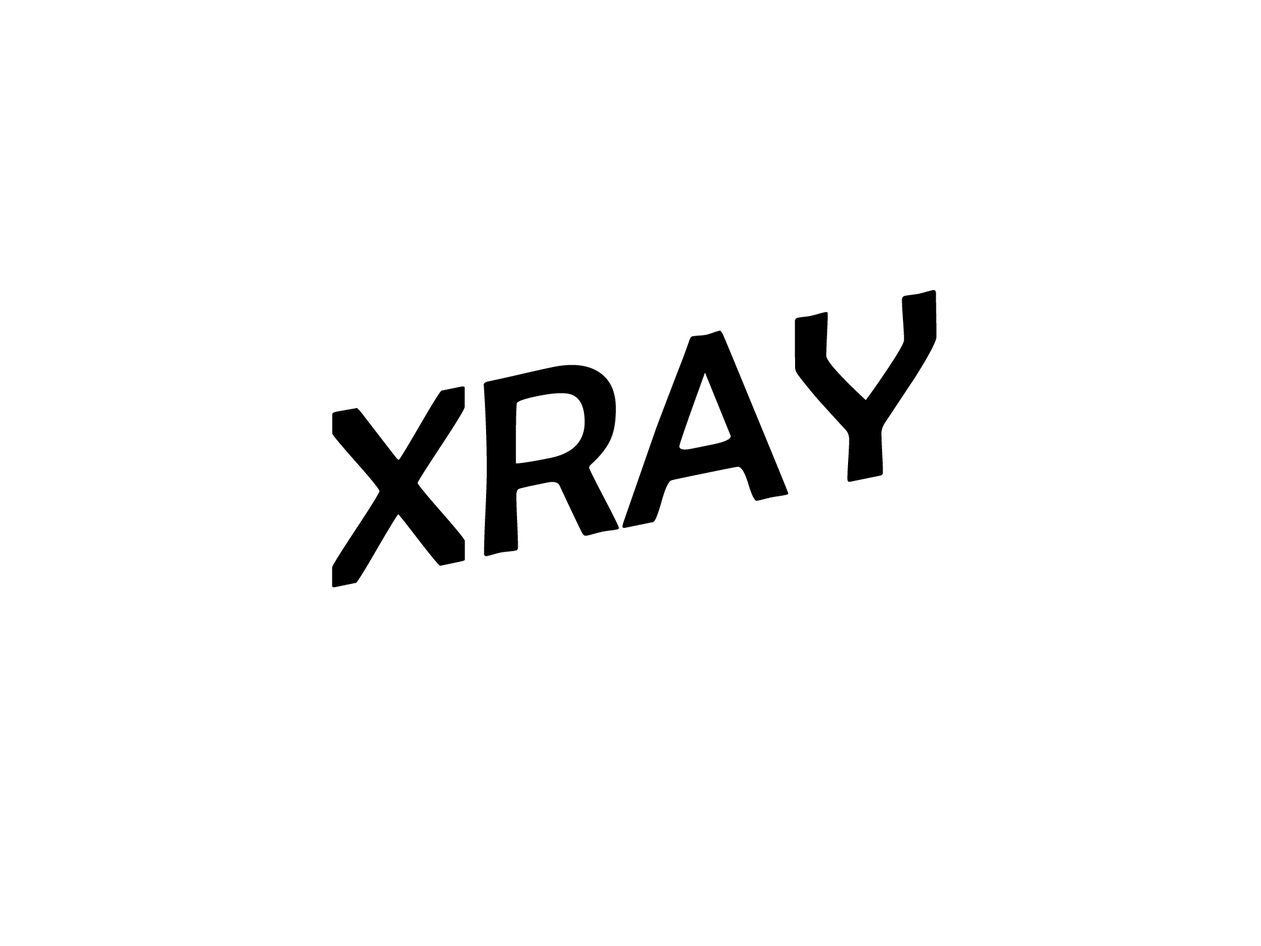
<style>
.page{position:relative;width:1261px;height:946px;background:#ffffff}
.page>*{position:absolute;margin:0}
.t1{font:254.7px "BerlinSansFB-Reg";color:#000000;font-variant:small-caps}
</style>
<div class="page">
<p class="t1" style="left:332px;top:290px;width:605px;height:298px;rotate:-12deg">XRAY</p>
</div>
